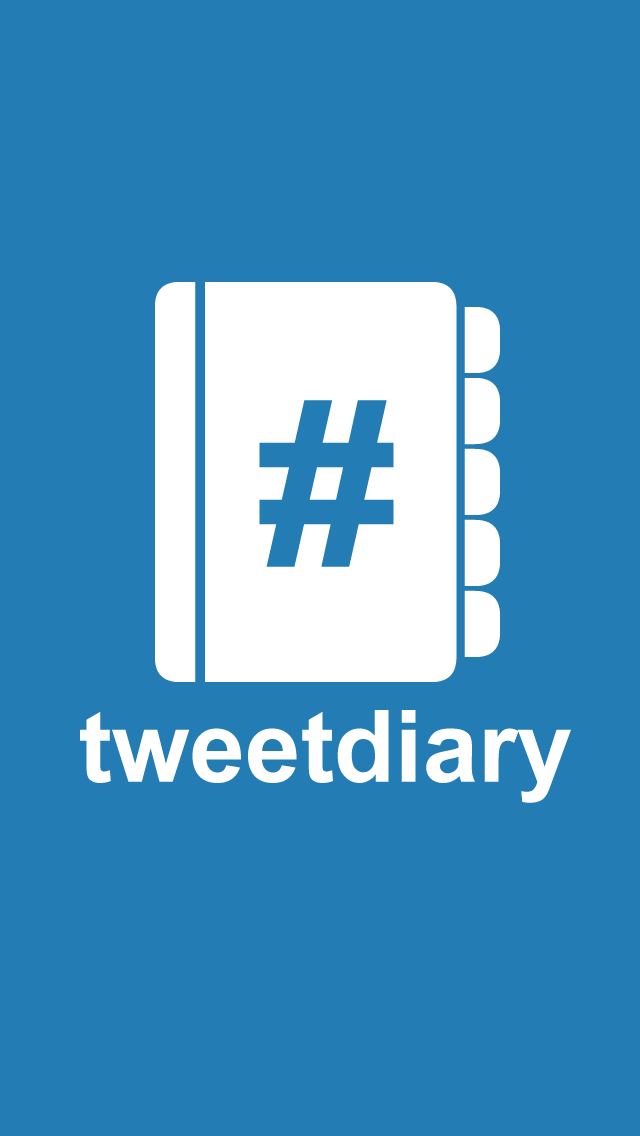
<style>
.page{position:relative;width:640px;height:1136px;background:#237db4}
.page>*{position:absolute;margin:0}
.t1{font:225px "Arial-BoldMT";color:#237db4;scale:1.11 1}
.t2{font:100px "Arial-BoldMT";color:#ffffff}
</style>
<div class="page">
<p class="t1" style="left:259px;top:400px;width:135px;height:167px">#</p>
<p class="t2" style="left:80px;top:710px;width:491px;height:93px">tweetdiary</p>
</div>
